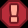
<style>
.page{position:relative;width:28px;height:28px;background:#b82d3a}
.page>*{position:absolute;margin:0}
.t1{font:24px "Rockwell-ExtraBold";color:#ffaa97}
</style>
<div class="page">
<p class="t1" style="left:11px;top:5px;width:6px;height:17px">!</p>
</div>
